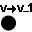
<style>
.page{position:relative;width:32px;height:32px;background:#ffffff}
.page>*{position:absolute;margin:0}
.t1{font:12px "Arial-BoldMT";color:#000000}
</style>
<div class="page">
<p class="t1" style="left:0px;top:5px;width:7px;height:7px">v</p>
<p class="t1" style="left:17px;top:3px;width:15px;height:9px">v 1</p>
</div>
